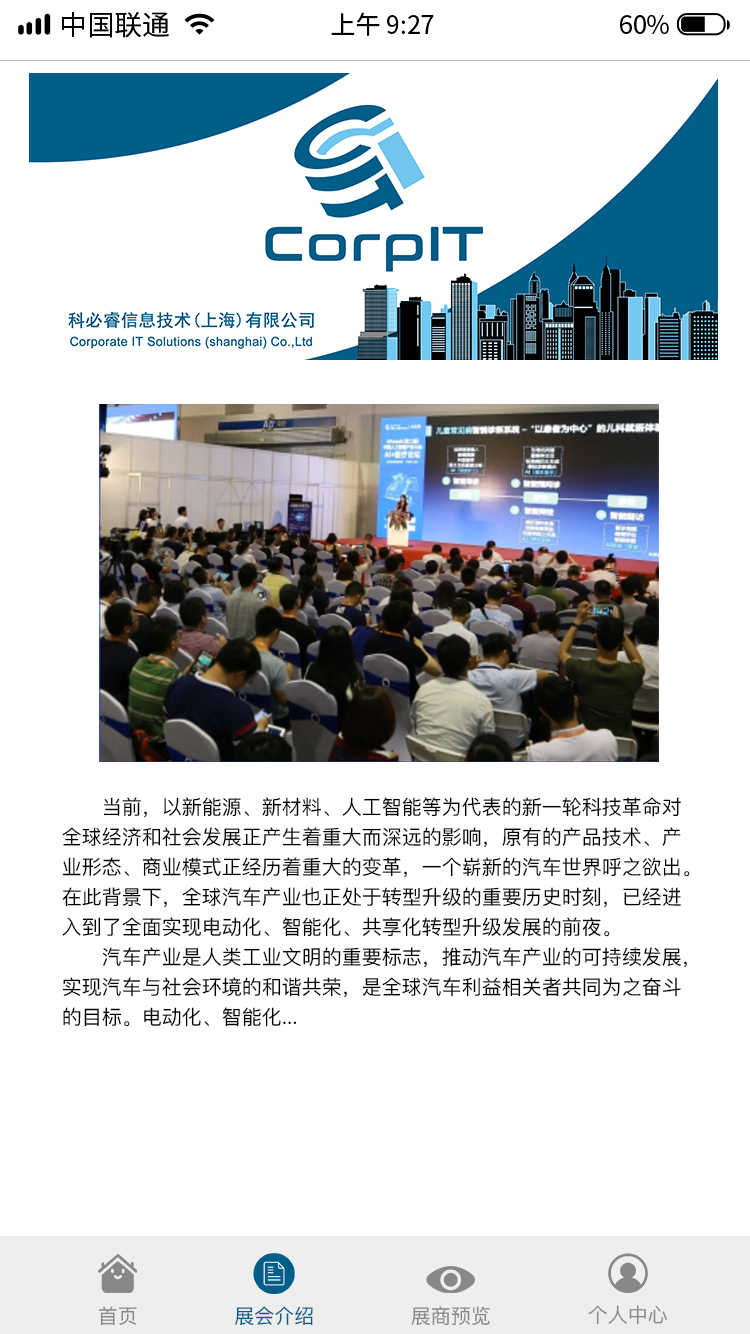
<style>
.page{position:relative;width:750px;height:1334px;background:#ffffff}
.page>*{position:absolute;margin:0}
.t1{font:27.8px "SourceHanSansCN-Regular";color:#000000}
.t2{font:25px "SourceHanSansCN-Regular";color:#000000}
.t3{font:20px/30px "PingFang-SC-Medium";color:#000000}
.t4{font:20px/30px "PingFangTC";color:#000000}
.t5{font:20px "PingFangTC";color:#888888}
.t6{font:20px "PingFangTC";color:#015e89}
</style>
<div class="page">
<p class="t1" style="left:62px;top:12px;width:107px;height:26px">中国联通</p>
<p class="t2" style="left:331px;top:12px;width:103px;height:24px">上午 9:27</p>
<p class="t2" style="left:620px;top:15px;width:49px;height:19px">60%</p>
<p class="t3" style="left:62px;top:797px;width:628px;height:230px"><span class="t4">      </span>当前，以新能源、新材料、人工智能等为代表的新一轮科技革命对<br>全球经济和社会发展正产生着重大而深远的影响，原有的产品技术、产<br>业形态、商业模式正经历着重大的变革，一个崭新的汽车世界呼之欲出。<br>在此背景下，全球汽车产业也正处于转型升级的重要历史时刻，已经进<br>入到了全面实现电动化、智能化、共享化转型升级发展的前夜。<br>      汽车产业是人类工业文明的重要标志，推动汽车产业的可持续发展，<br>实现汽车与社会环境的和谐共荣，是全球汽车利益相关者共同为之奋斗<br>的目标。电动化、智能化...</p>
<p class="t5" style="left:99px;top:1306px;width:38px;height:20px">首页</p>
<p class="t6" style="left:235px;top:1306px;width:78px;height:20px">展会介绍</p>
<p class="t5" style="left:411px;top:1306px;width:79px;height:20px">展商预览</p>
<p class="t5" style="left:588px;top:1305px;width:79px;height:20px">个人中心</p>
</div>
